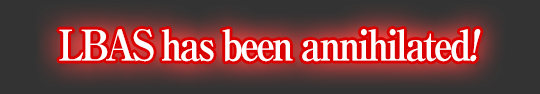
<style>
.page{position:relative;width:540px;height:94px;background:#333333}
.page>*{position:absolute;margin:0}
.t1{font:42px "RyuminPro-ExBold";letter-spacing:-0.08em;color:#ffffff;scale:0.9 1}
.t2{font:42px "RyuminPro-ExBold";letter-spacing:-0.08em;color:#ffffff;font-style:italic;scale:0.9 1}
</style>
<div class="page">
<p class="t1" style="left:59px;top:29px;width:422px;height:33px">LBAS has been annihilated<span class="t2">!</span></p>
</div>
